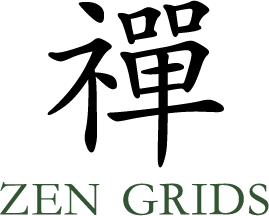
<style>
.page{position:relative;width:269px;height:216px;background:#ffffff}
.page>*{position:absolute;margin:0}
.t1{font:200px "STKaiti";letter-spacing:-0.025em;color:#000000}
.t2{font:68.7px "STKaiti";letter-spacing:0.025em;color:#335533;font-variant:small-caps}
</style>
<div class="page">
<p class="t1" style="left:47px;top:0px;width:177px;height:168px">禪</p>
<p class="t2" style="left:0px;top:182px;width:269px;height:34px">zen grids</p>
</div>
